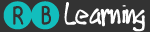
<style>
.page{position:relative;width:150px;height:32px;background:#333333}
.page>*{position:absolute;margin:0}
.t1{font:22px "DJBOntheSpot";letter-spacing:-0.05em;color:#12bebd}
.t2{font:30px "PWCartoonMarker";letter-spacing:-0.05em;color:#ffffff}
</style>
<div class="page">
<p class="t1" style="left:3px;top:1px;width:57px;height:29px">RB</p>
<p class="t2" style="left:64px;top:2px;width:81px;height:30px">Learning</p>
</div>
